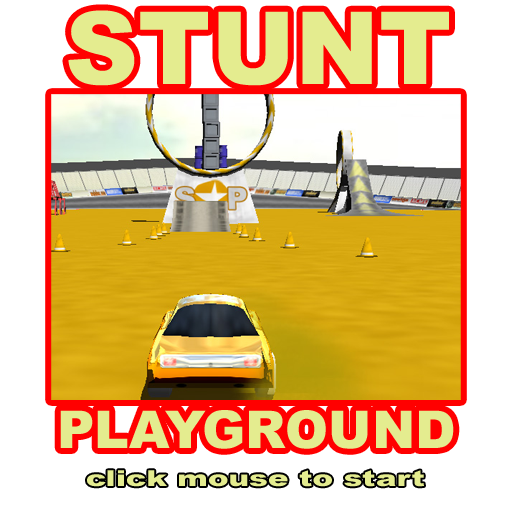
<style>
.page{position:relative;width:512px;height:512px;background:#ffffff}
.page>*{position:absolute;margin:0}
.t1{font:101px "Arial-Black";color:#e4ec8f}
.t2{font:52px "Arial-Black";color:#e4ec8f}
.t3{font:22px "Arial-Black";color:#e4ec8f;scale:1.4 1}
</style>
<div class="page">
<p class="t1" style="left:68px;top:10px;width:381px;height:76px">STUNT</p>
<p class="t2" style="left:60px;top:410px;width:394px;height:39px">PLAYGROUND</p>
<p class="t3" style="left:87px;top:470px;width:337px;height:17px">click mouse to start</p>
</div>
